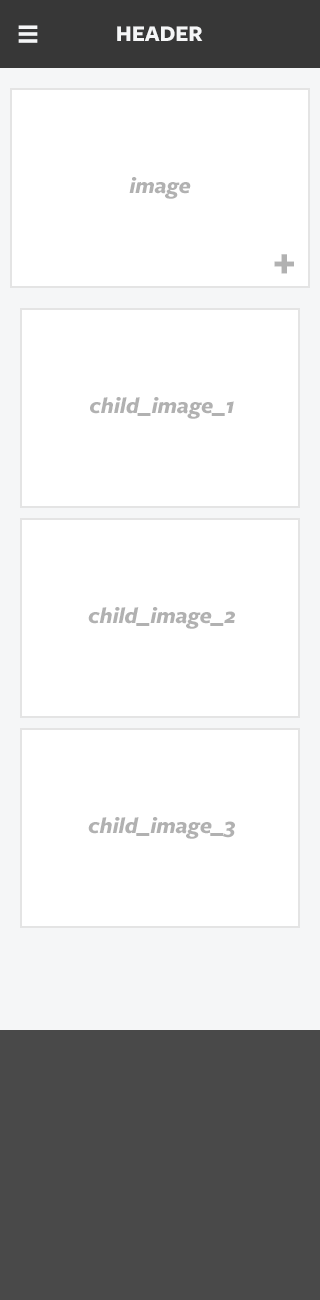
<style>
.page{position:relative;width:320px;height:1300px;background:#ffffff}
.page>*{position:absolute;margin:0}
.t1{font:23px "FreightSansBoldSC";color:#f5f6f7}
.t2{font:23px "FreightSansBoldItalic";color:#b1b1b1}
.t3{font:42px "FreightSansBoldItalic";color:#b1b1b1}
</style>
<div class="page">
<p class="t1" style="left:117px;top:26px;width:86px;height:15px">HEADER</p>
<p class="t2" style="left:129px;top:177px;width:62px;height:22px">image</p>
<p class="t3" style="left:274px;top:254px;width:20px;height:20px">+</p>
<p class="t2" style="left:90px;top:397px;width:144px;height:22px">child_image_1</p>
<p class="t2" style="left:88px;top:607px;width:147px;height:22px">child_image_2</p>
<p class="t2" style="left:88px;top:817px;width:147px;height:22px">child_image_3</p>
</div>
